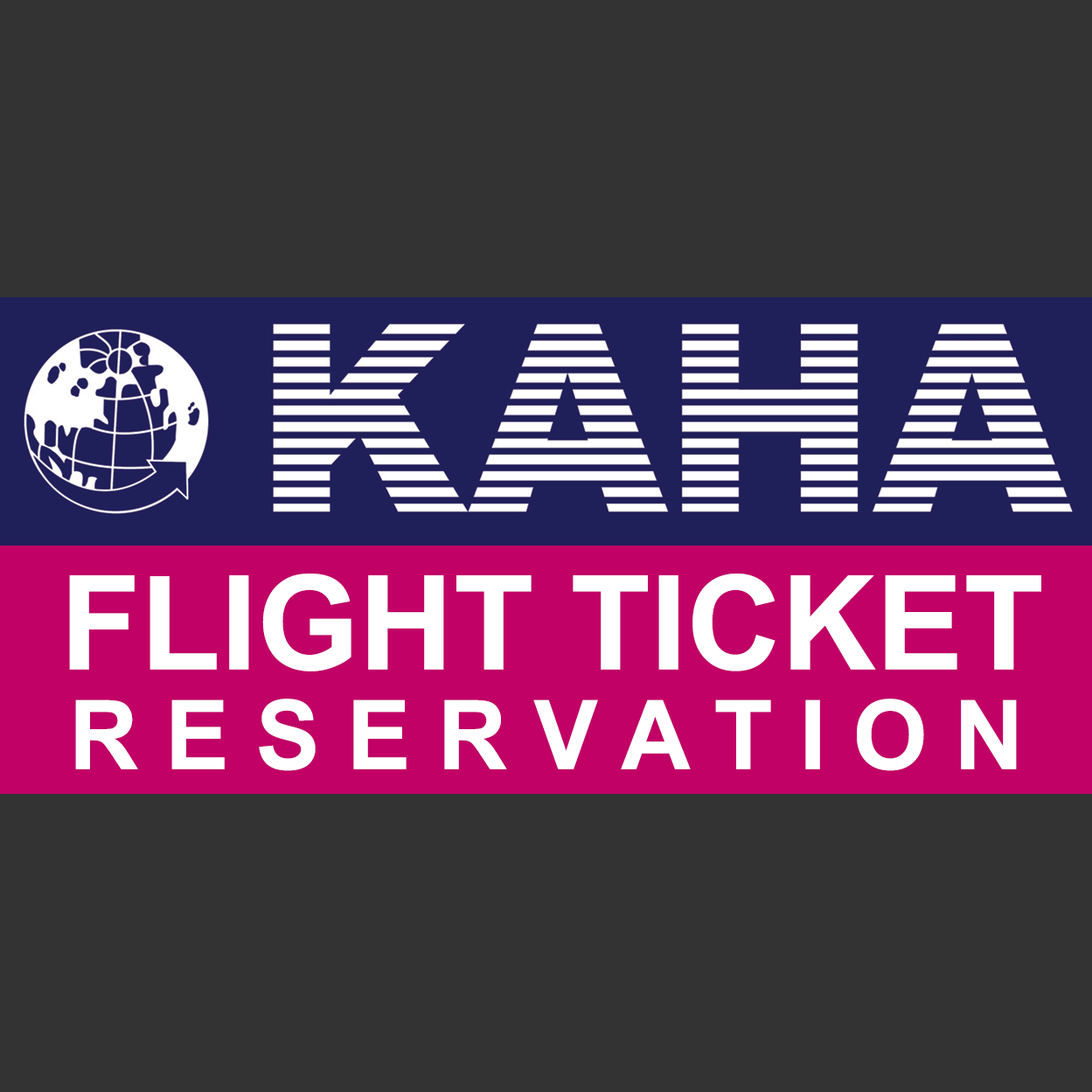
<style>
.page{position:relative;width:1092px;height:1092px;background:#333333}
.page>*{position:absolute;margin:0}
.t1{font:131.1px "Arial-BoldMT";color:#ffffff}
.t2{font:96.2px "Arial-BoldMT";color:#ffffff}
</style>
<div class="page">
<p class="t1" style="left:69px;top:574px;width:972px;height:97px">FLIGHT TICKET</p>
<p class="t2" style="left:75px;top:699px;width:942px;height:72px">R E S E R V A T I O N</p>
</div>
